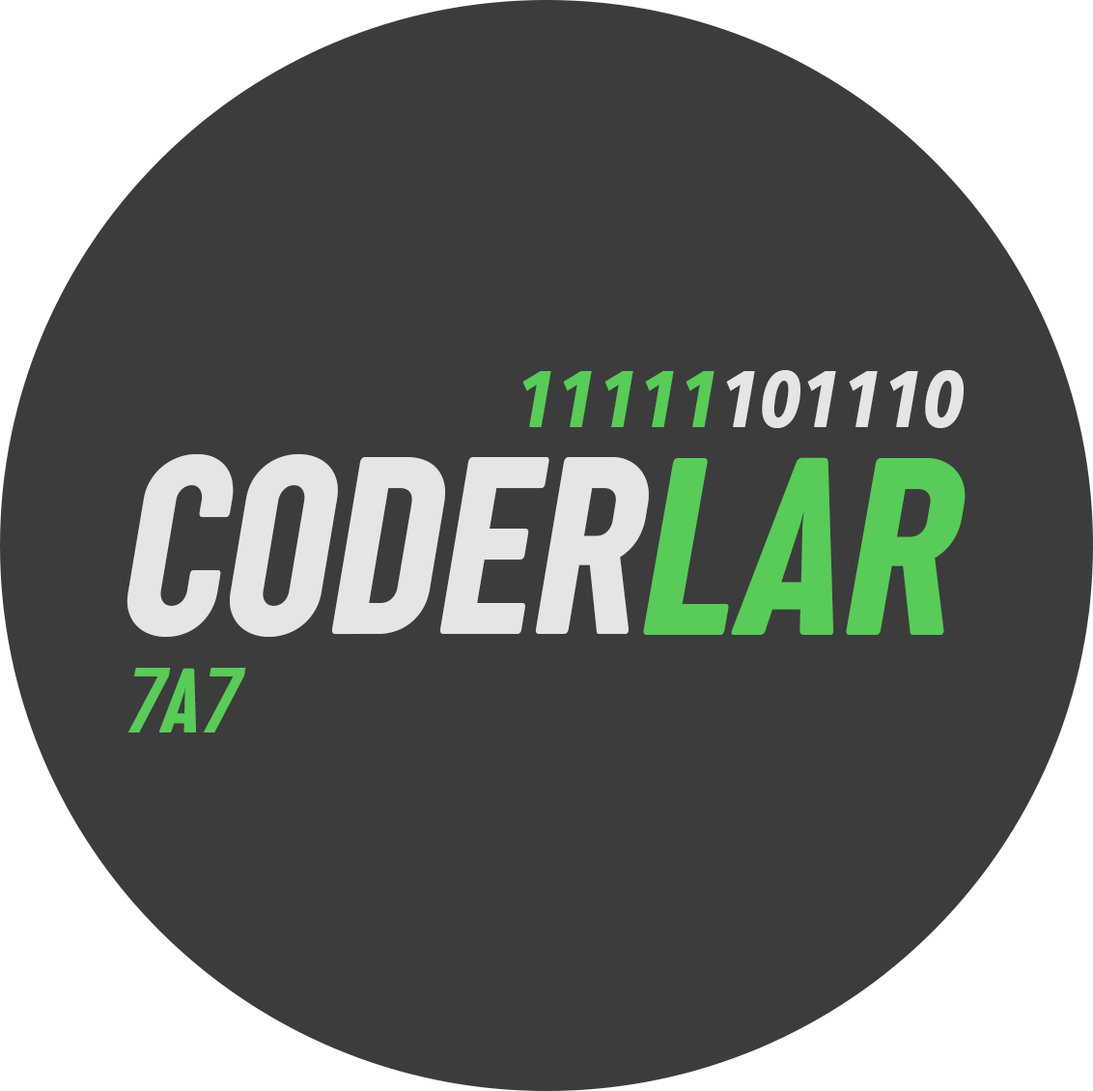
<style>
.page{position:relative;width:1093px;height:1091px;background:#3c3c3c}
.page>*{position:absolute;margin:0}
.t1{font:78.7px "AvenirNextCondensed-BoldItalic";color:#59cb58}
.t2{font:78.7px "AvenirNextCondensed-BoldItalic";color:#e5e5e5}
.t3{font:262px "SugoProClassicTrial-Italic";color:#e5e5e5;scale:0.95 1}
.t4{font:262px "SugoProClassicTrial-Italic";color:#59cb58}
.t5{font:90.7px "AvenirNextCondensed-DemiBoldItalic";color:#59cb58}
.t6{font:94.6px "SugoProClassicTrial-Italic";color:#59cb58}
</style>
<div class="page">
<p class="t1" style="left:523px;top:371px;width:192px;height:56px">11111</p>
<p class="t2" style="left:726px;top:370px;width:238px;height:58px">101110</p>
<p class="t3" style="left:127px;top:454px;width:522px;height:183px">CODER</p>
<p class="t4" style="left:643px;top:457px;width:323px;height:178px">LAR</p>
<p class="t5" style="left:128px;top:667px;width:43px;height:65px">7</p>
<p class="t6" style="left:159px;top:667px;width:37px;height:65px">A</p>
<p class="t5" style="left:203px;top:667px;width:43px;height:65px">7</p>
</div>
